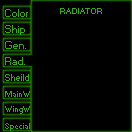
<style>
.page{position:relative;width:132px;height:132px;background:#000000}
.page>*{position:absolute;margin:0}
.t1{font:10px "Small Fonts";color:#31af00}
.t2{font:8px "Small Fonts";color:#31af00}
.t3{font:9px "Small Fonts";color:#31af00}
</style>
<div class="page">
<p class="t1" style="left:5px;top:9px;width:23px;height:8px">Color</p>
<p class="t2" style="left:60px;top:8px;width:42px;height:6px">RADIATOR</p>
<p class="t1" style="left:5px;top:25px;width:20px;height:10px">Ship</p>
<p class="t1" style="left:5px;top:41px;width:21px;height:8px">Gen.</p>
<p class="t1" style="left:5px;top:57px;width:20px;height:8px">Rad.</p>
<p class="t3" style="left:5px;top:74px;width:24px;height:7px">Sheild</p>
<p class="t2" style="left:5px;top:91px;width:25px;height:6px">MainW</p>
<p class="t2" style="left:5px;top:123px;width:25px;height:8px">Special</p>
</div>
